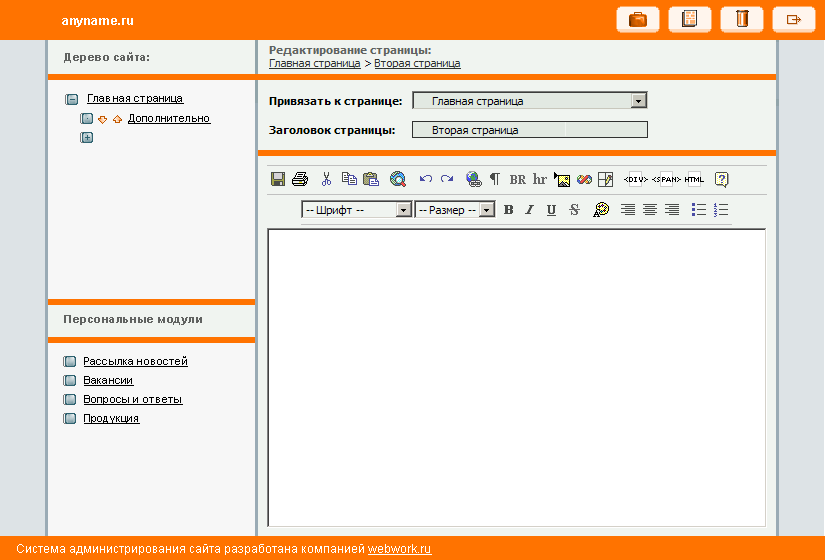
<style>
.page{position:relative;width:825px;height:560px;background:#ffffff}
.page>*{position:absolute;margin:0}
.t1{font:12px "Arial-BoldMT";letter-spacing:0.05em;color:#ffffff}
.t2{font:11px "Arial-BoldMT";letter-spacing:0.05em;color:#606260}
.t3{font:11px "ArialMT";letter-spacing:0.015em;color:#000000;text-decoration:underline}
.t4{font:12px "ArialMT";color:#ffffff}
.t5{font:12px "ArialMT";color:#ffffff;text-decoration:underline}
</style>
<div class="page">
<p class="t1" style="left:62px;top:18px;width:71px;height:9px">anyname.ru</p>
<p class="t2" style="left:64px;top:52px;width:85px;height:11px">Дерево сайта:</p>
<p class="t3" style="left:87px;top:94px;width:97px;height:10px">Главная страница</p>
<p class="t3" style="left:128px;top:114px;width:83px;height:10px">Дополнительно</p>
<p class="t2" style="left:64px;top:315px;width:138px;height:10px">Персональные модули</p>
<p class="t3" style="left:84px;top:356px;width:104px;height:11px">Рассылка новостей</p>
<p class="t3" style="left:84px;top:376px;width:50px;height:10px">Вакансии</p>
<p class="t3" style="left:84px;top:395px;width:99px;height:10px">Вопросы и ответы</p>
<p class="t3" style="left:84px;top:414px;width:56px;height:10px">Продукция</p>
<p class="t4" style="left:17px;top:544px;width:415px;height:11px">Система администрирования сайта разработана компанией <span class="t5">webwork.ru</span></p>
</div>
